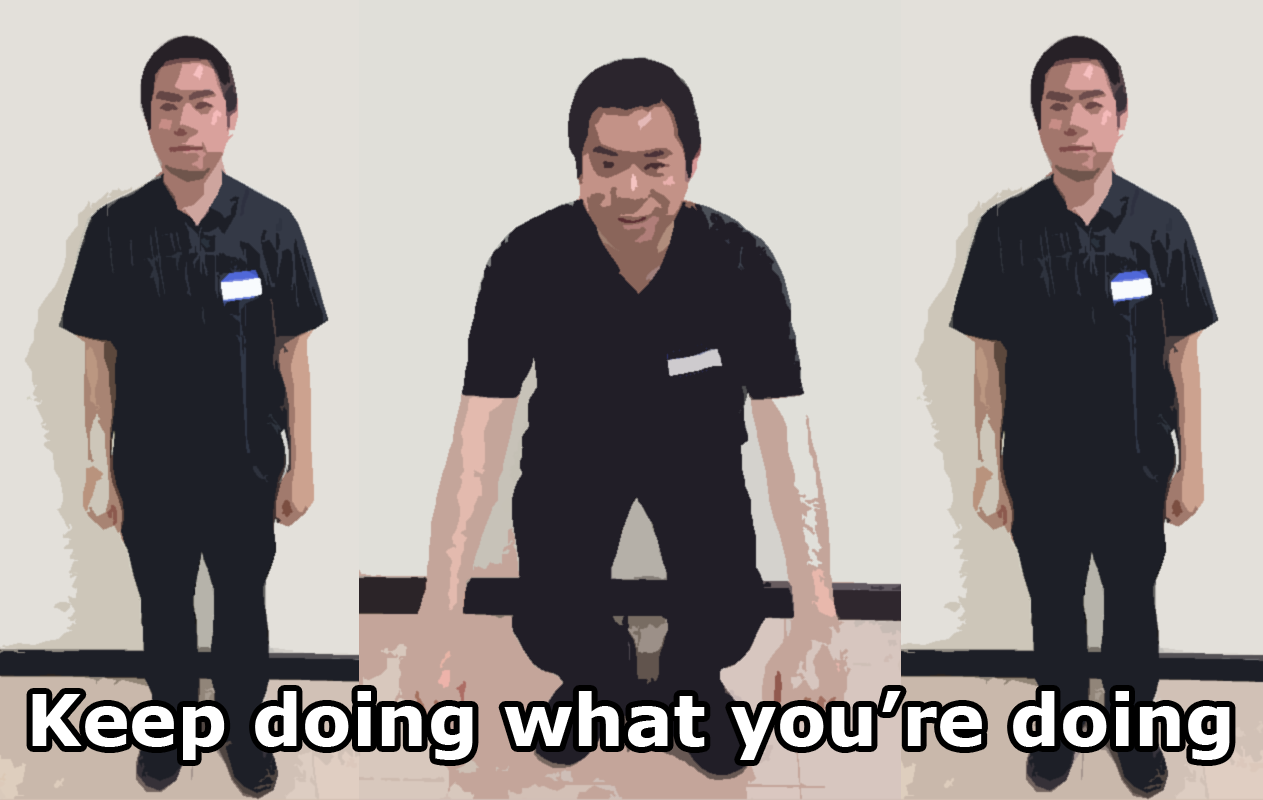
<style>
.page{position:relative;width:1263px;height:800px;background:#e3e0da}
.page>*{position:absolute;margin:0}
.t1{font:72px "Verdana-Bold";color:#ffffff}
</style>
<div class="page">
<p class="t1" style="left:32px;top:691px;width:1198px;height:69px">Keep doing what you’re doing</p>
</div>
